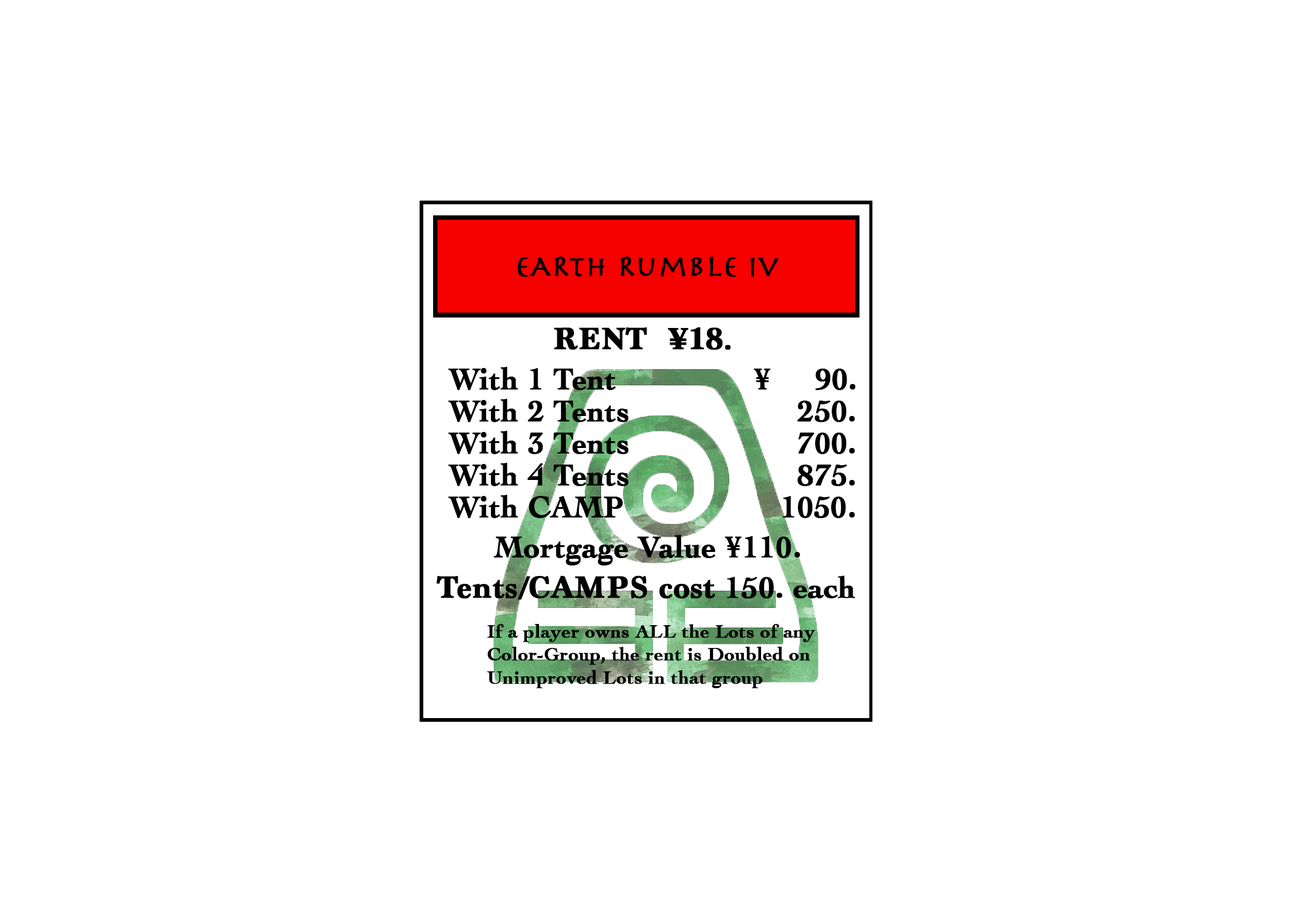
<style>
.page{position:relative;width:1292px;height:923px;background:#ffffff}
.page>*{position:absolute;margin:0}
.t1{font:30.8px "Herculanum";color:#000000;font-weight:bold}
.t2{font:32px "Marion-Bold";color:#000000;font-weight:bold}
.t3{font:30.8px "Cochin-Bold";color:#000000;font-weight:bold}
.t4{font:19.2px "Cochin-Bold";color:#000000;font-weight:bold}
</style>
<div class="page">
<p class="t1" style="left:517px;top:256px;width:261px;height:21px">eARth Rumble iv</p>
<p class="t2" style="left:554px;top:327px;width:177px;height:23px">RENT  ¥18.</p>
<p class="t3" style="left:448px;top:367px;width:408px;height:23px">With 1 Tent               ¥     90.</p>
<p class="t3" style="left:448px;top:399px;width:407px;height:23px">With 2 Tents                   250.</p>
<p class="t3" style="left:448px;top:431px;width:407px;height:23px">With 3 Tents                   700.</p>
<p class="t3" style="left:448px;top:463px;width:407px;height:23px">With 4 Tents                   875.</p>
<p class="t3" style="left:448px;top:495px;width:407px;height:23px">With CAMP                1050.</p>
<p class="t3" style="left:493px;top:535px;width:307px;height:30px">Mortgage Value ¥110.</p>
<p class="t2" style="left:436px;top:575px;width:419px;height:25px">Tents/CAMPS cost <span class="t3">150. each</span></p>
<p class="t4" style="left:487px;top:624px;width:328px;height:64px">If a player owns ALL the Lots of any <br>Color-Group, the rent is Doubled on <br>Unimproved Lots in that group</p>
</div>
